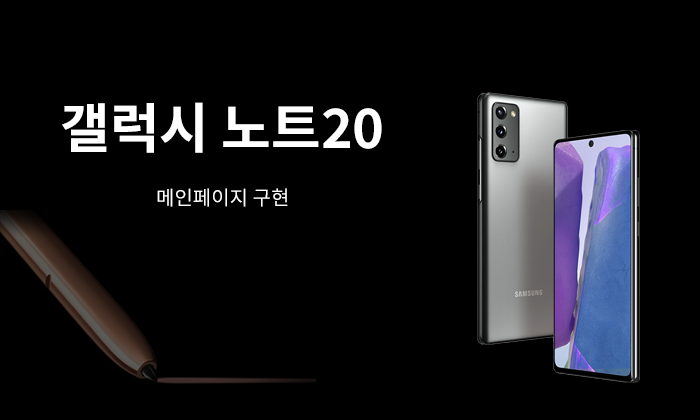
<style>
.page{position:relative;width:700px;height:420px;background:#000000}
.page>*{position:absolute;margin:0}
.t1{font:54px "NotoSansKR-Bold";color:#ffffff}
.t2{font:20px "NotoSansKR-Regular";color:#ffffff}
</style>
<div class="page">
<p class="t1" style="left:62px;top:102px;width:320px;height:51px">갤럭시 노트20</p>
<p class="t2" style="left:157px;top:188px;width:131px;height:19px">메인페이지 구현</p>
</div>
